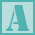
<style>
.page{position:relative;width:35px;height:35px;background:#b7ddde}
.page>*{position:absolute;margin:0}
.t1{font:34px "StencilStd";color:#50b3af}
</style>
<div class="page">
<p class="t1" style="left:5px;top:5px;width:25px;height:26px">A</p>
</div>
